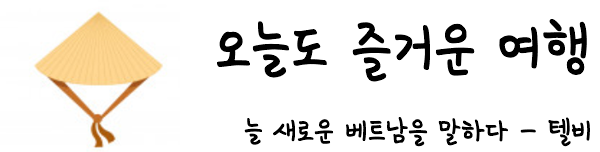
<style>
.page{position:relative;width:600px;height:152px;background:#ffffff}
.page>*{position:absolute;margin:0}
.t1{font:81px "SDMiSaeng";color:#000000}
.t2{font:38.1px "SDMiSaeng";color:#000000}
</style>
<div class="page">
<p class="t1" style="left:217px;top:19px;width:370px;height:63px">오늘도 즐거운 여행</p>
<p class="t2" style="left:244px;top:117px;width:346px;height:30px">늘 새로운 베트남을 말하다 - 텔비</p>
</div>
